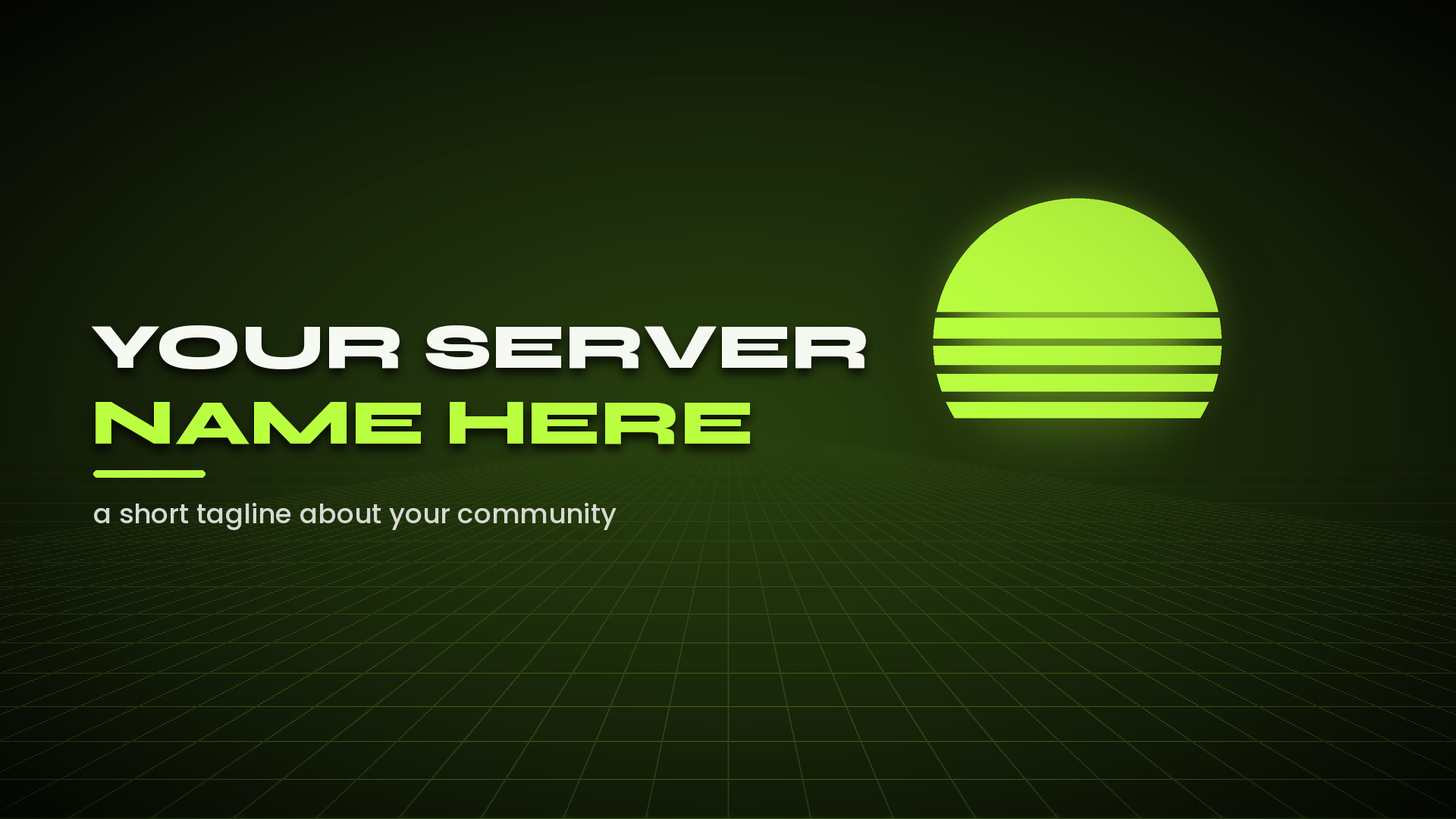
<style>
.page{position:relative;width:1456px;height:819px}
.page>*{position:absolute;margin:0}
.t1{font:64.5px "Syne-ExtraBold";color:#f6f8f2}
.t2{font:64.5px "Syne-ExtraBold";color:#baff40}
.t3{font:27.3px "Poppins-Medium";color:#d6dad2}
</style>
<div class="page">
<p class="t1" style="left:91px;top:325px;width:775px;height:44px">YOUR SERVER</p>
<p class="t2" style="left:96px;top:402px;width:654px;height:42px">NAME HERE</p>
<p class="t3" style="left:94px;top:503px;width:523px;height:27px">a short tagline about your community</p>
</div>
